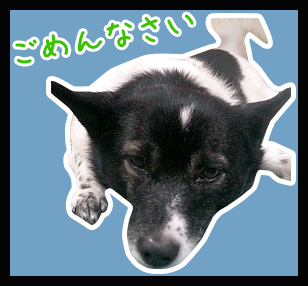
<style>
.page{position:relative;width:308px;height:286px;background:#71a1c5}
.page>*{position:absolute;margin:0}
.t1{font:41.1px "APJapanesefont";color:#3cc300}
</style>
<div class="page">
<p class="t1" style="left:15px;top:14px;width:179px;height:50px;rotate:-10deg">ごめんなさい</p>
</div>
